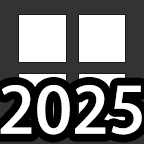
<style>
.page{position:relative;width:144px;height:144px;background:#ffffff}
.page>*{position:absolute;margin:0}
.t1{font:63.5px "AdobeHeitiStd-Regular";color:#ffffff;scale:1.04 1}
</style>
<div class="page">
<p class="t1" style="left:0px;top:85px;width:142px;height:50px">2025</p>
</div>
